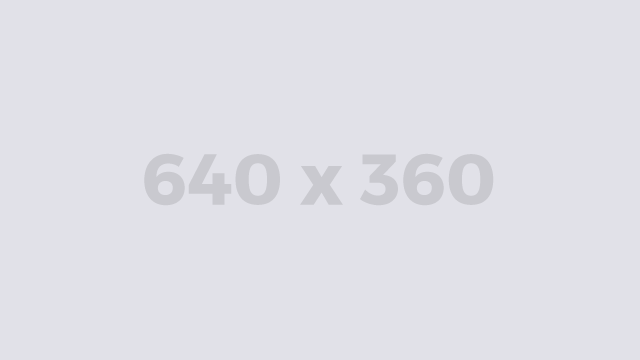
<style>
.page{position:relative;width:640px;height:360px;background:#e1e1e8}
.page>*{position:absolute;margin:0}
.t1{font:72px "Montserrat-Bold";color:#c9c9cf}
</style>
<div class="page">
<p class="t1" style="left:144px;top:153px;width:350px;height:53px">640 x 360</p>
</div>
